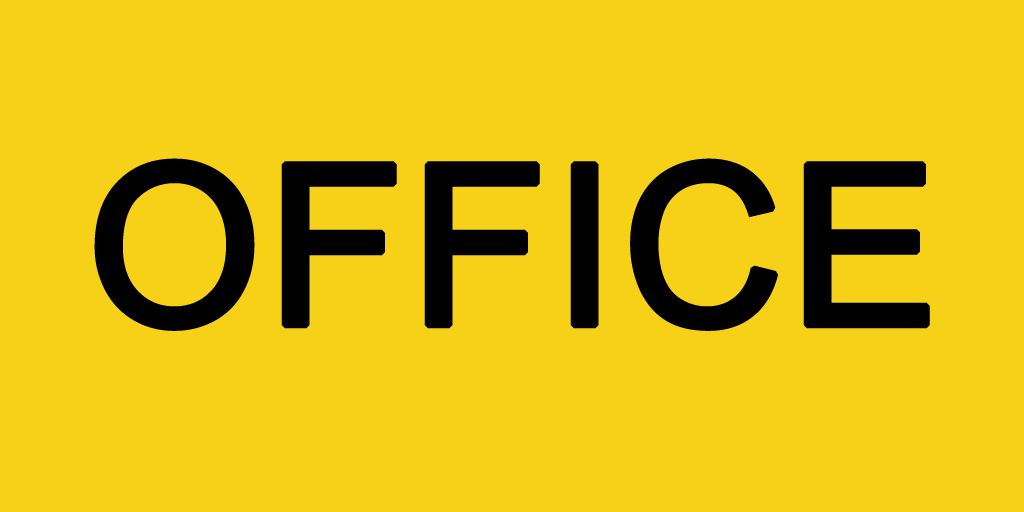
<style>
.page{position:relative;width:1024px;height:512px;background:#f7d117}
.page>*{position:absolute;margin:0}
.t1{font:224.1px "ArialMT";color:#000000;font-weight:bold}
</style>
<div class="page">
<p class="t1" style="left:94px;top:158px;width:836px;height:173px">OFFICE</p>
</div>
